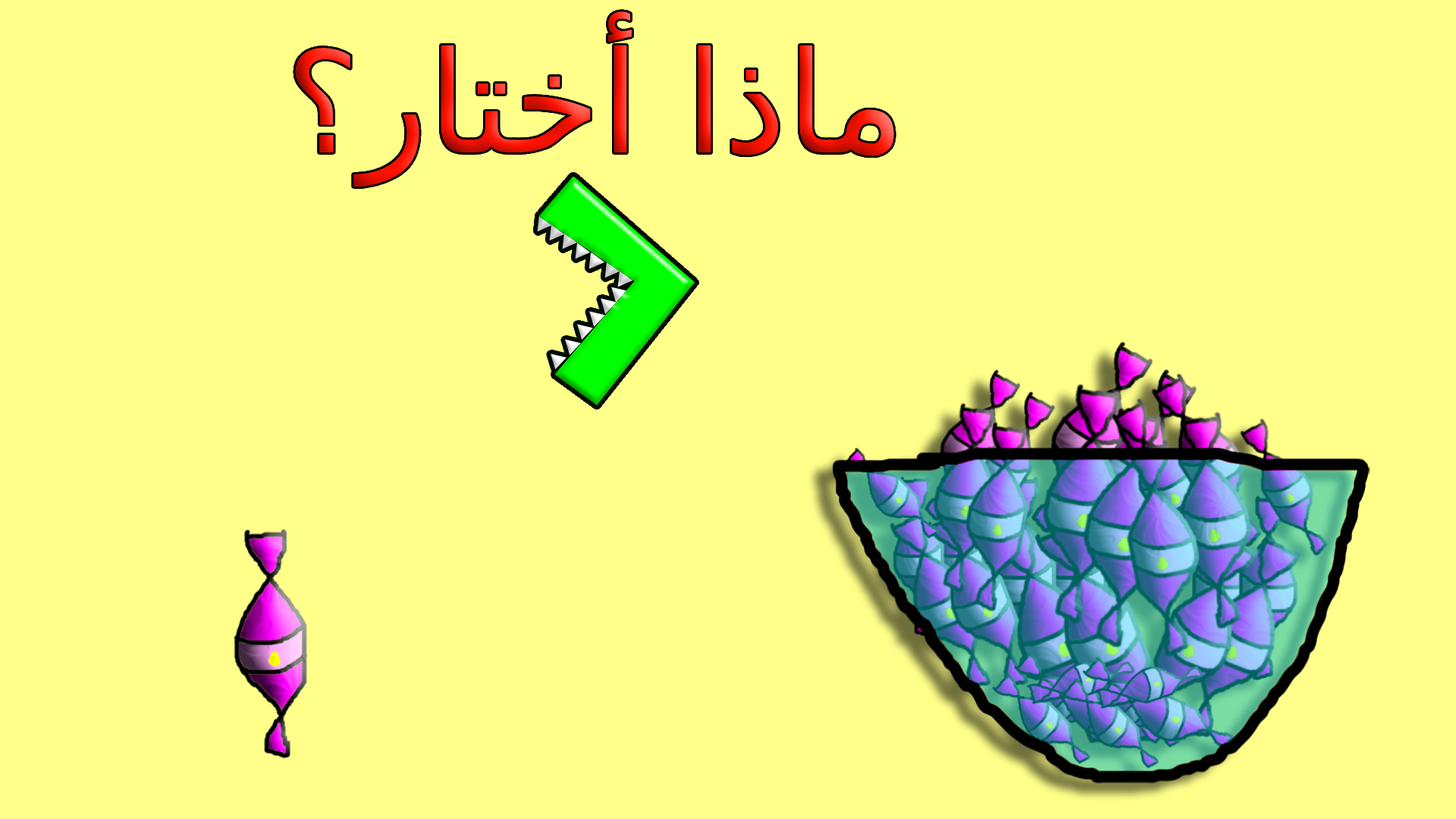
<style>
.page{position:relative;width:1456px;height:819px;background:#ffff89}
.page>*{position:absolute;margin:0}
.t1{font:141px "DejaVuSans"}
</style>
<div class="page">
<p class="t1" style="left:295px;top:11px;width:599px;height:176px">ماذا أختار؟</p>
</div>
